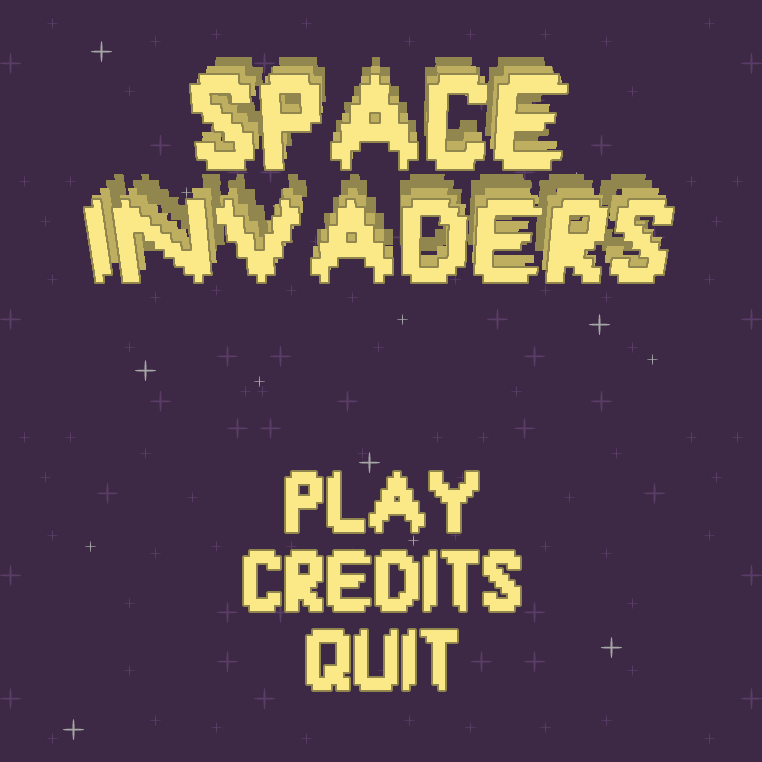
<style>
.page{position:relative;width:762px;height:762px;background:#3d2946}
.page>*{position:absolute;margin:0}
.t1{font:66px "SmackyFormula";color:#fbe988}
</style>
<div class="page">
<p class="t1" style="left:244px;top:472px;width:276px;height:218px;text-align:center">PLAY<br>CREDITS<br>QUIT</p>
</div>
